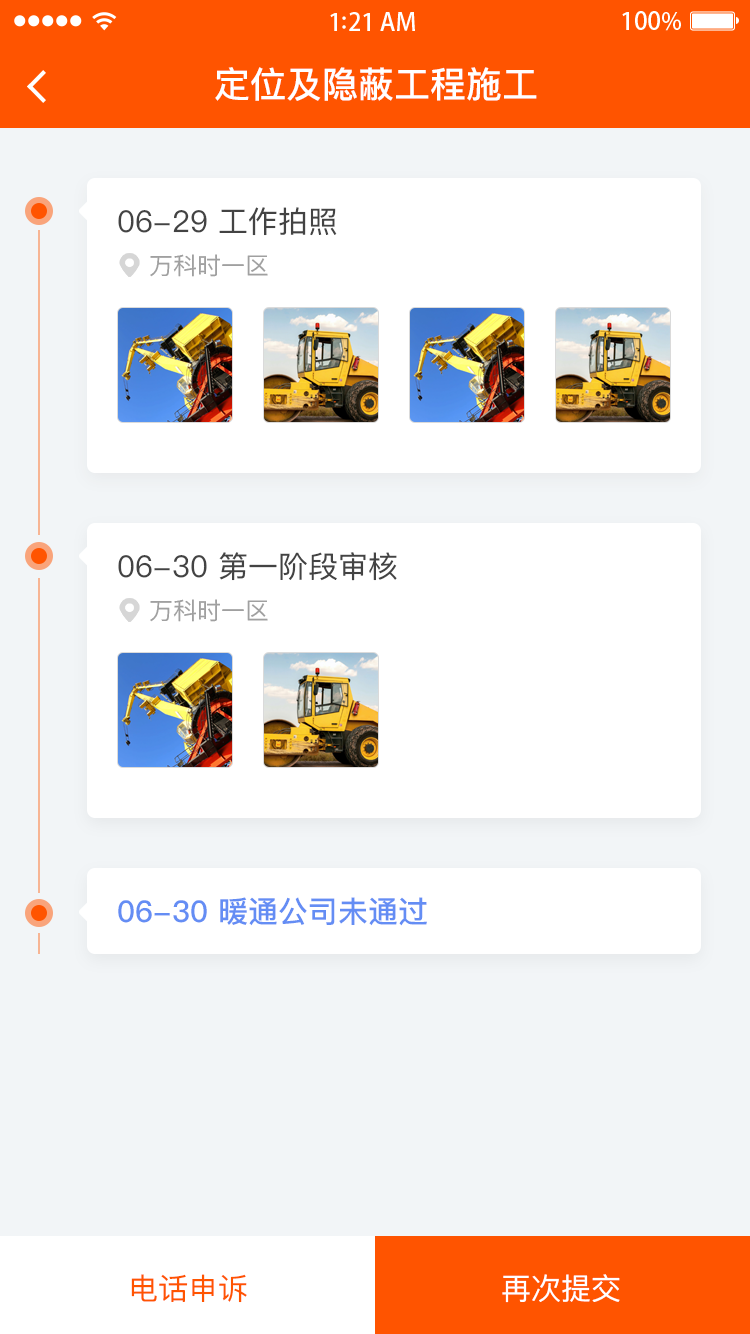
<style>
.page{position:relative;width:750px;height:1334px;background:#ffffff}
.page>*{position:absolute;margin:0}
.t1{font:36px "PingFangSC-Medium";color:#ffffff}
.t2{font:30px "PingFangSC-Regular";color:#434343}
.t3{font:24px "PingFangSC-Regular";color:#a0a0a0}
.t4{font:30px "PingFangSC-Medium";color:#648df4}
.t5{font:30px "PingFangSC-Regular";color:#ff5400}
.t6{font:30px "PingFangSC-Regular";color:#ffffff}
</style>
<div class="page">
<p class="t1" style="left:215px;top:67px;width:322px;height:34px">定位及隐蔽工程施工</p>
<p class="t2" style="left:118px;top:207px;width:219px;height:29px">06-29 工作拍照</p>
<p class="t3" style="left:150px;top:254px;width:118px;height:23px">万科时一区</p>
<p class="t2" style="left:118px;top:552px;width:279px;height:29px">06-30 第一阶段审核</p>
<p class="t3" style="left:150px;top:599px;width:118px;height:23px">万科时一区</p>
<p class="t4" style="left:118px;top:897px;width:309px;height:29px">06-30 暖通公司未通过</p>
<p class="t5" style="left:131px;top:1274px;width:116px;height:29px">电话申诉</p>
<p class="t6" style="left:502px;top:1274px;width:118px;height:29px">再次提交</p>
</div>
